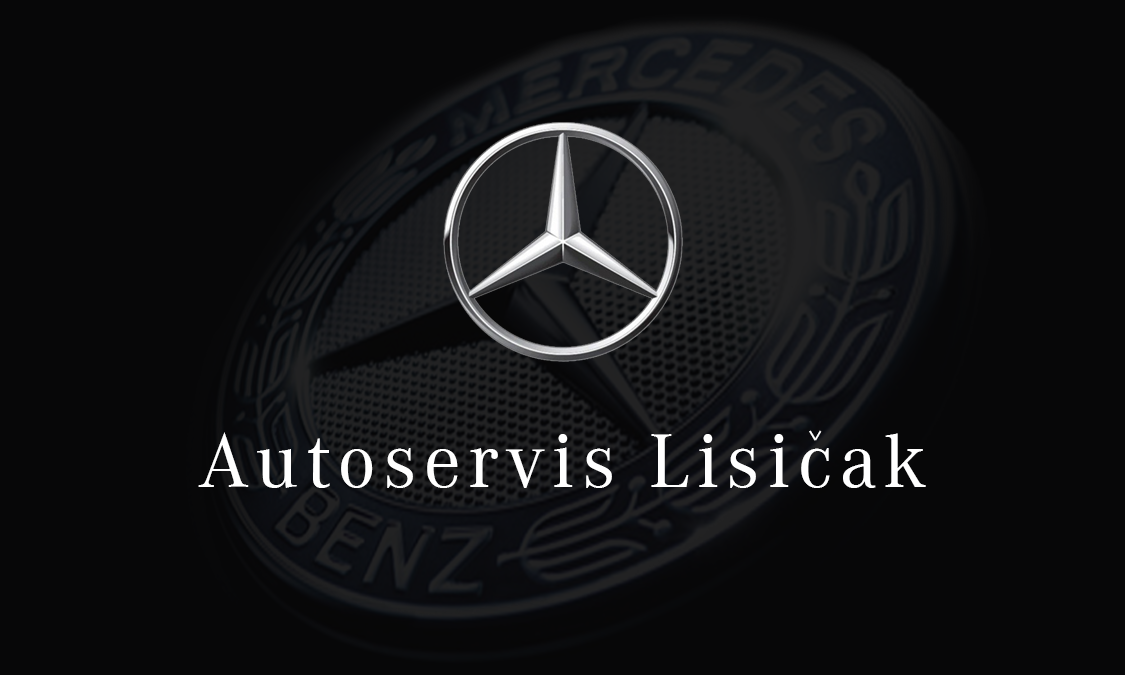
<style>
.page{position:relative;width:1125px;height:675px;background:#070708}
.page>*{position:absolute;margin:0}
.t1{font:75px "CorporateABQ-Regular";letter-spacing:0.1em;color:#ffffff}
.t2{font:42.9px "CorporateABQ-Regular";letter-spacing:0.1em;color:#ffffff;scale:0.91 1}
.t3{font:41.1px "CorporateABQ-Regular";letter-spacing:0.1em;color:#ffffff;scale:0.9 1}
</style>
<div class="page">
<p class="t1" style="left:198px;top:432px;width:728px;height:56px">Autoservis Lisicak</p>
<p class="t2" style="left:809px;top:430px;width:8px;height:11px;rotate:-121deg">-</p>
<p class="t3" style="left:814px;top:430px;width:8px;height:11px;rotate:-59deg">-</p>
</div>
